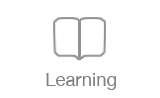
<style>
.page{position:relative;width:160px;height:98px;background:#ffffff}
.page>*{position:absolute;margin:0}
.t1{font:18.5px "HelveticaNeue";color:#807f7f}
</style>
<div class="page">
<p class="t1" style="left:46px;top:73px;width:70px;height:17px">Learning</p>
</div>
